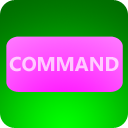
<style>
.page{position:relative;width:128px;height:128px}
.page>*{position:absolute;margin:0}
.t1{font:19.9px "MicrosoftTaiLe-Bold";color:#ffcaff}
</style>
<div class="page">
<p class="t1" style="left:9px;top:56px;width:110px;height:16px">COMMAND</p>
</div>
